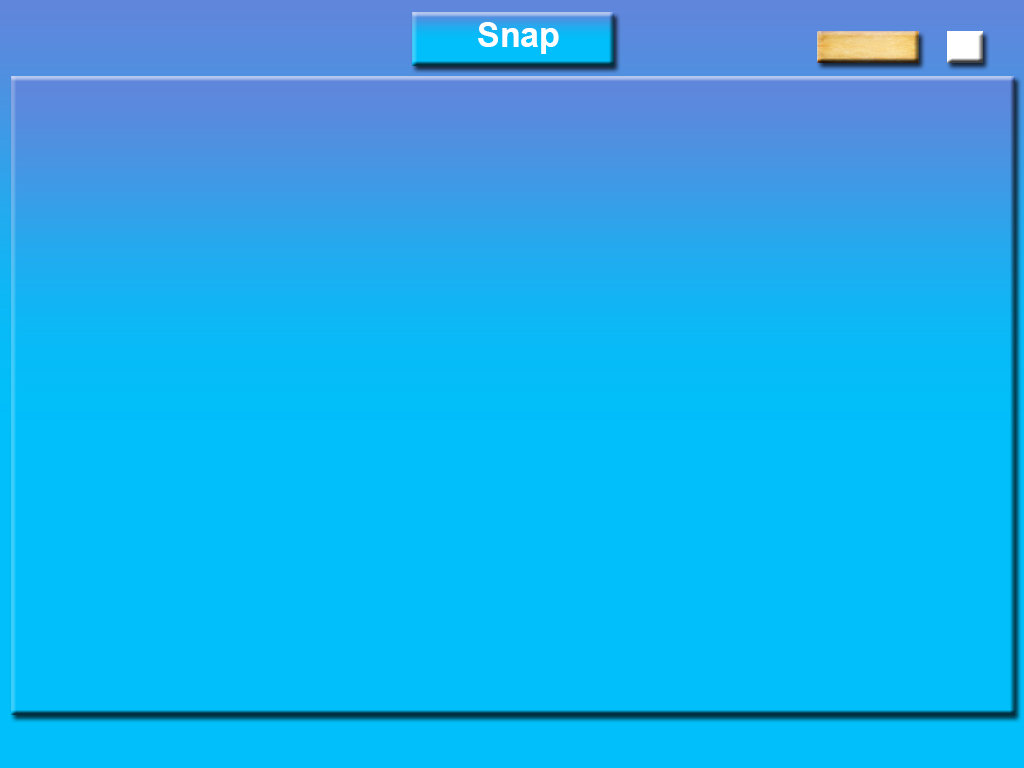
<style>
.page{position:relative;width:1024px;height:768px;background:#00bffa}
.page>*{position:absolute;margin:0}
.t1{font:34px "Arial-BoldMT";color:#ffffff}
</style>
<div class="page">
<p class="t1" style="left:478px;top:22px;width:81px;height:32px">Snap</p>
</div>
